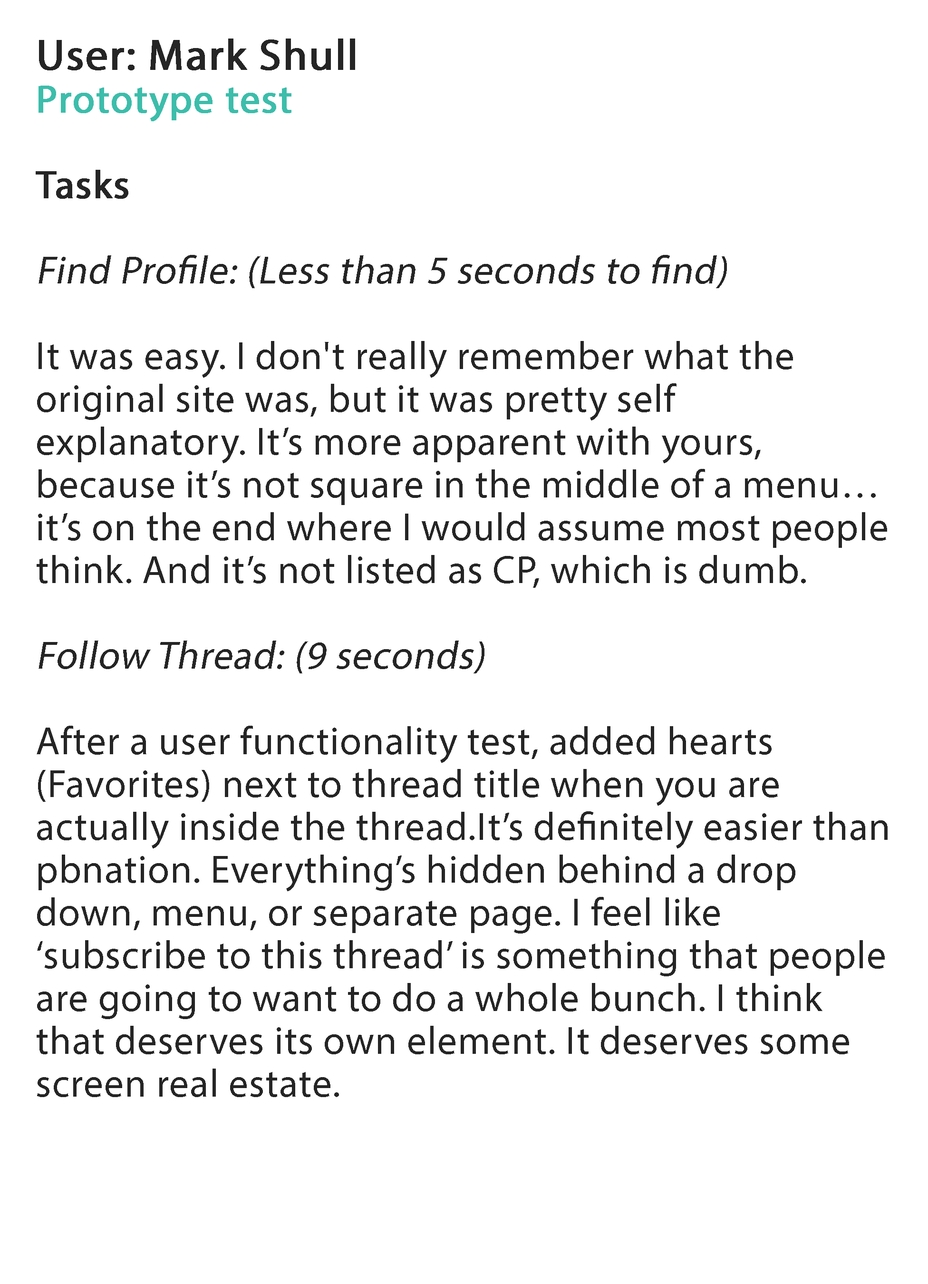
<style>
.page{position:relative;width:928px;height:1284px;background:#ffffff}
.page>*{position:absolute;margin:0}
.t1{font:39.2px "MyriadPro-Regular";letter-spacing:0.02em;color:#252525}
.t2{font:43.6px "MyriadPro-Regular";letter-spacing:0.02em;color:#252525;font-weight:bold}
.t3{font:39.2px "MyriadPro-Regular";letter-spacing:0.02em;color:#3dbdab;font-weight:bold}
.t4{font:39.2px "MyriadPro-Regular";letter-spacing:0.02em;color:#252525;font-weight:bold}
.t5{font:39.2px "MyriadPro-Regular";letter-spacing:0.02em;color:#252525;font-style:italic}
</style>
<div class="page">
<p class="t1" style="left:36px;top:39px;width:852px;height:1058px"><span class="t2">User: Mark Shull<br></span><span class="t3">Prototype test<br><br></span><span class="t4">Tasks<br><br></span><span class="t5">Find Profile: (Less than 5 seconds to find)<br><br></span>It was easy. I don't really remember what the original site was, but it was pretty self explanatory. It’s more apparent with yours, because it’s not square in the middle of a menu… it’s on the end where I would assume most people think. And it’s not listed as CP, which is dumb.<br><br><span class="t5">Follow Thread: (9 seconds)<br></span><br>After a user functionality test, added hearts (Favorites) next to thread title when you are actually inside the thread.It’s definitely easier than pbnation. Everything’s hidden behind a drop down, menu, or separate page. I feel like ‘subscribe to this thread’ is something that people are going to want to do a whole bunch. I think that deserves its own element. It deserves some screen real estate.</p>
</div>
